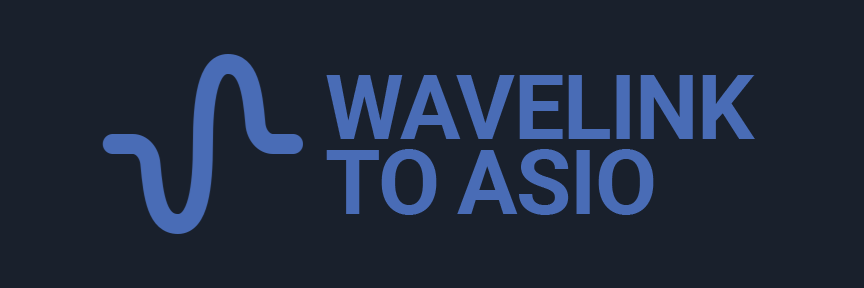
<style>
.page{position:relative;width:864px;height:288px;background:#19202c}
.page>*{position:absolute;margin:0}
.t1{font:90px/75px "Roboto-Bold";letter-spacing:-0.05em;color:#496cb6;text-transform:uppercase}
</style>
<div class="page">
<p class="t1" style="left:326px;top:75px;width:429px;height:140px">WAVELINK<br>to asio</p>
</div>
